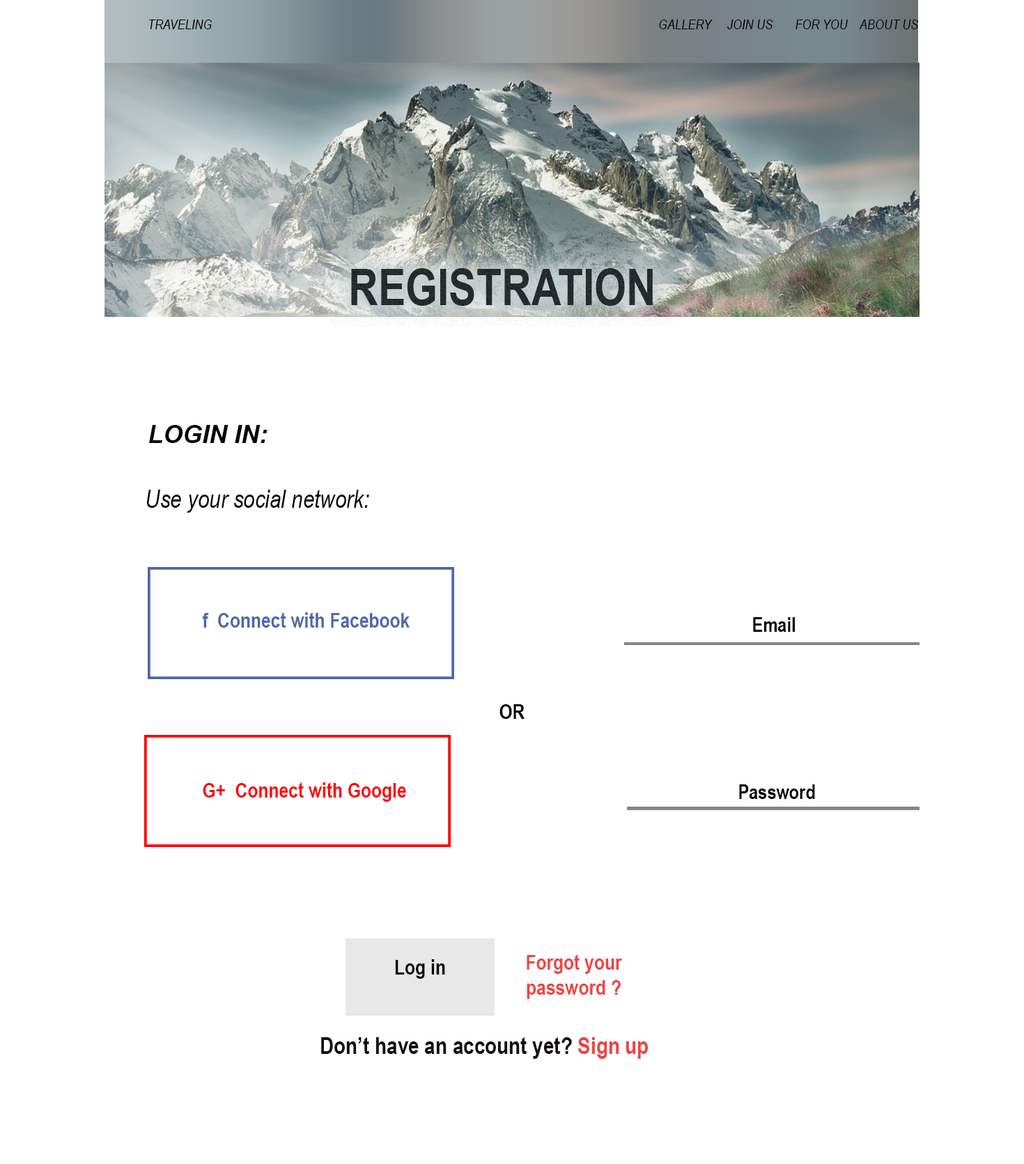
<style>
.page{position:relative;width:1024px;height:1164px;background:#ffffff}
.page>*{position:absolute;margin:0}
.t1{font:14.1px "ArialNarrow-Italic";color:#060607}
.t2{font:50.2px "ArialNarrow-Italic";color:#2b3134}
.t3{font:50.2px "ArialNarrow-Bold";color:#2b3134}
.t4{font:25.1px "Arial-BoldItalicMT";color:#060607}
.t5{font:25.1px "ArialNarrow-Italic";color:#060607}
.t6{font:20.9px "ArialNarrow-Bold";color:#4d67ac}
.t7{font:20.1px "ArialNarrow-Bold";color:#040202}
.t8{font:20.9px "ArialNarrow-Bold";color:#010101}
.t9{font:20.9px "ArialNarrow-Bold";color:#ff0000}
.t10{font:20.9px "ArialNarrow-Bold";color:#040202}
.t11{font:20.9px "ArialNarrow-Bold";color:#ee4343}
.t12{font:23.7px "ArialNarrow-Bold";color:#140f0f}
.t13{font:23.7px "ArialNarrow-Bold";color:#ee4343}
</style>
<div class="page">
<p class="t1" style="left:149px;top:20px;width:63px;height:9px">TRAVELING</p>
<p class="t1" style="left:659px;top:20px;width:260px;height:9px">GALLERY     JOIN US       FOR YOU    ABOUT US</p>
<p class="t2" style="left:351px;top:268px;width:302px;height:38px"><span class="t3">REGISTRATION<br></span>   <br>registration<br><br>registration<br><br>registration</p>
<p class="t4" style="left:149px;top:425px;width:119px;height:18px">LOGIN IN:</p>
<p class="t5" style="left:146px;top:490px;width:223px;height:23px">Use your social network:</p>
<p class="t6" style="left:202px;top:612px;width:208px;height:16px">f  Connect with Facebook</p>
<p class="t7" style="left:753px;top:617px;width:42px;height:15px">Email</p>
<p class="t8" style="left:500px;top:704px;width:25px;height:15px">OR</p>
<p class="t9" style="left:203px;top:782px;width:203px;height:20px">G+  Connect with Google</p>
<p class="t7" style="left:739px;top:785px;width:76px;height:14px">Password</p>
<p class="t10" style="left:395px;top:959px;width:50px;height:20px">Log in</p>
<p class="t11" style="left:527px;top:955px;width:95px;height:44px;text-align:center">Forgot your password ?</p>
<p class="t12" style="left:321px;top:1037px;width:327px;height:22px">Don’t have an account yet? <span class="t13">Sign up</span></p>
</div>
